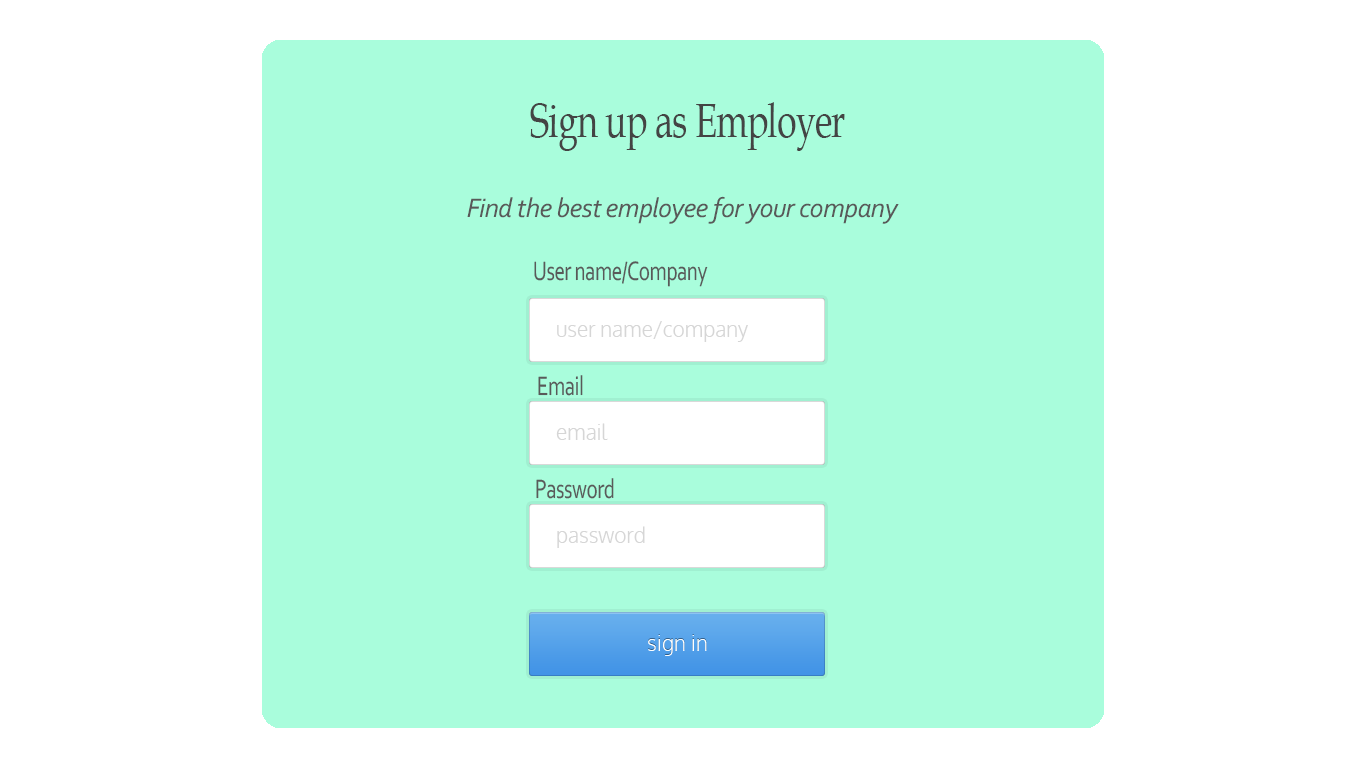
<style>
.page{position:relative;width:1366px;height:768px;background:#ffffff}
.page>*{position:absolute;margin:0}
.t1{font:48px "BookAntiqua";letter-spacing:-0.025em;color:#444444;scale:0.75 1}
.t2{font:28px "Corbel-Italic";letter-spacing:-0.025em;color:#595959}
.t3{font:28px "Corbel";letter-spacing:-0.025em;color:#595959;scale:0.75 1}
.t4{font:21px "Oxygen-Light";color:#d6d6d6}
.t5{font:28px "Corbel";letter-spacing:-0.025em;color:#5a5a5a;scale:0.75 1}
.t6{font:21px "Oxygen-Light";color:#ffffff}
</style>
<div class="page">
<p class="t1" style="left:530px;top:102px;width:315px;height:49px">Sign up as Employer</p>
<p class="t2" style="left:467px;top:196px;width:432px;height:28px">Find the best employee for your company</p>
<p class="t3" style="left:534px;top:261px;width:174px;height:26px">User name/Company</p>
<p class="t4" style="left:557px;top:321px;width:191px;height:21px">user name/company</p>
<p class="t3" style="left:538px;top:375px;width:45px;height:21px">Email</p>
<p class="t4" style="left:556px;top:423px;width:52px;height:17px">email</p>
<p class="t5" style="left:536px;top:478px;width:78px;height:21px">Password</p>
<p class="t4" style="left:557px;top:526px;width:88px;height:22px">password</p>
<p class="t6" style="left:648px;top:635px;width:59px;height:21px">sign in</p>
</div>
